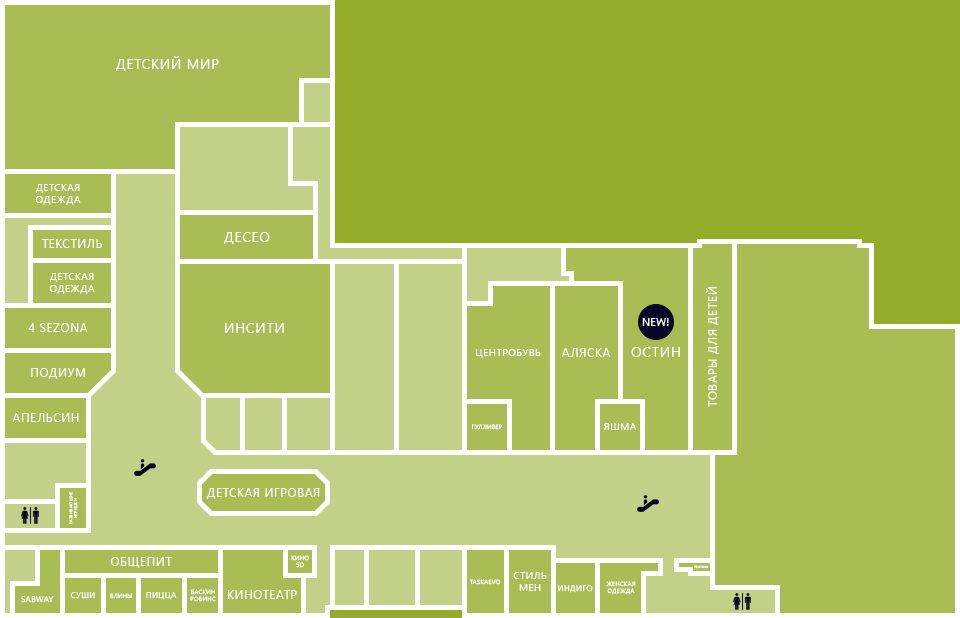
<style>
.page{position:relative;width:960px;height:618px;background:#a9bd54}
.page>*{position:absolute;margin:0}
.t1{font:14px "SegoeUI";letter-spacing:0.05em;color:#ffffff;text-transform:uppercase}
.t2{font:10px "SegoeUI";letter-spacing:0.05em;color:#ffffff;text-transform:uppercase}
.t3{font:12px "SegoeUI";letter-spacing:0.05em;color:#ffffff;text-transform:uppercase}
.t4{font:11px "SegoeUI";color:#ffffff;text-transform:uppercase}
.t5{font:6px "SegoeUI";letter-spacing:0.05em;color:#ffffff;text-transform:uppercase}
.t6{font:4px "SegoeUI";letter-spacing:0.05em;color:#ffffff;text-transform:uppercase}
.t7{font:3px "SegoeUI";letter-spacing:0.05em;color:#ffffff;text-transform:uppercase}
.t8{font:8px "SegoeUI";letter-spacing:0.05em;color:#ffffff;text-transform:uppercase}
</style>
<div class="page">
<p class="t1" style="left:116px;top:56px;width:103px;height:15px">Детский мир</p>
<p class="t2" style="left:35px;top:184px;width:46px;height:21px;text-align:center">Детская<br>одежда</p>
<p class="t1" style="left:224px;top:232px;width:46px;height:12px">Десео</p>
<p class="t3" style="left:41px;top:239px;width:61px;height:9px">Текстиль</p>
<p class="t2" style="left:49px;top:273px;width:46px;height:21px;text-align:center">Детская<br>одежда</p>
<p class="t3" style="left:705px;top:287px;width:14px;height:120px;rotate:-90deg">Товары для детей</p>
<p class="t4" style="left:642px;top:318px;width:27px;height:8px">New!</p>
<p class="t3" style="left:28px;top:323px;width:60px;height:9px">4 SEZONA</p>
<p class="t1" style="left:225px;top:323px;width:59px;height:10px">Инсити</p>
<p class="t2" style="left:476px;top:349px;width:65px;height:9px">ЦентрОбувь</p>
<p class="t3" style="left:561px;top:348px;width:50px;height:9px">Аляска</p>
<p class="t1" style="left:631px;top:347px;width:49px;height:10px">Остин</p>
<p class="t3" style="left:31px;top:368px;width:54px;height:11px">Подиум</p>
<p class="t3" style="left:12px;top:413px;width:67px;height:9px">Апельсин</p>
<p class="t5" style="left:472px;top:424px;width:30px;height:6px">Гулливер</p>
<p class="t2" style="left:604px;top:423px;width:33px;height:7px">Яшма</p>
<p class="t6" style="left:69px;top:492px;width:9px;height:32px;text-align:center;rotate:-90deg">Развивающие<br>игрушки</p>
<p class="t3" style="left:206px;top:488px;width:114px;height:11px">Детская игровая</p>
<p class="t3" style="left:111px;top:557px;width:61px;height:11px">Общепит</p>
<p class="t5" style="left:291px;top:555px;width:18px;height:13px;text-align:center">Кино<br>5d</p>
<p class="t7" style="left:693px;top:565px;width:16px;height:4px">Teskoma</p>
<p class="t5" style="left:469px;top:579px;width:32px;height:6px">Taskaevo</p>
<p class="t2" style="left:513px;top:572px;width:34px;height:19px;text-align:center">Стиль<br>мен</p>
<p class="t5" style="left:606px;top:581px;width:30px;height:14px;text-align:center">Женская<br>одежда</p>
<p class="t8" style="left:70px;top:592px;width:25px;height:7px">Суши</p>
<p class="t5" style="left:110px;top:593px;width:22px;height:6px">Блины</p>
<p class="t8" style="left:146px;top:592px;width:31px;height:8px">Пицца</p>
<p class="t5" style="left:190px;top:589px;width:26px;height:13px;text-align:center">Баскин<br>Робинс</p>
<p class="t3" style="left:228px;top:590px;width:69px;height:9px">Кинотеатр</p>
<p class="t8" style="left:558px;top:585px;width:35px;height:8px">Индиго</p>
<p class="t8" style="left:21px;top:596px;width:33px;height:7px">Sabway</p>
</div>
